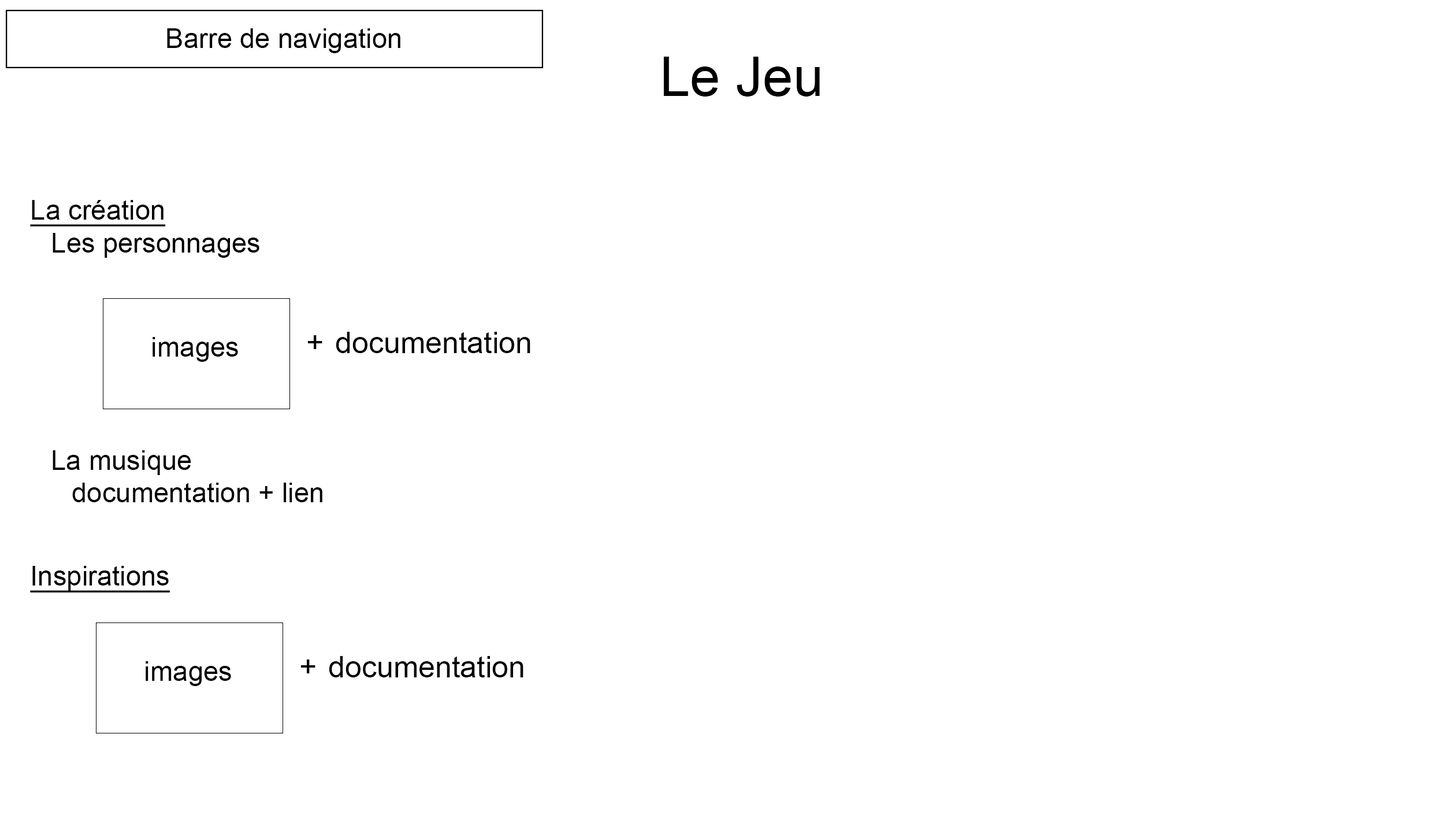
<style>
.page{position:relative;width:1456px;height:819px;background:#ffffff}
.page>*{position:absolute;margin:0}
.t1{font:27.3px "ArialMT";color:#000000}
.t2{font:54.6px "ArialMT";color:#000000}
.t3{font:27.3px "ArialMT";color:#000000;text-decoration:underline}
.t4{font:30px "ArialMT";color:#000000}
</style>
<div class="page">
<p class="t1" style="left:167px;top:28px;width:233px;height:25px">Barre de navigation</p>
<p class="t2" style="left:663px;top:57px;width:157px;height:40px">Le Jeu</p>
<p class="t1" style="left:30px;top:200px;width:229px;height:58px"><span class="t3">La création<br></span> Les personnages</p>
<p class="t1" style="left:153px;top:337px;width:85px;height:25px">images</p>
<p class="t4" style="left:307px;top:332px;width:223px;height:21px">documentation</p>
<p class="t1" style="left:53px;top:450px;width:269px;height:52px">La musique<br> documentation + lien</p>
<p class="t3" style="left:30px;top:566px;width:140px;height:27px">Inspirations</p>
<p class="t1" style="left:146px;top:661px;width:85px;height:25px">images</p>
<p class="t4" style="left:300px;top:656px;width:224px;height:21px">documentation</p>
</div>
